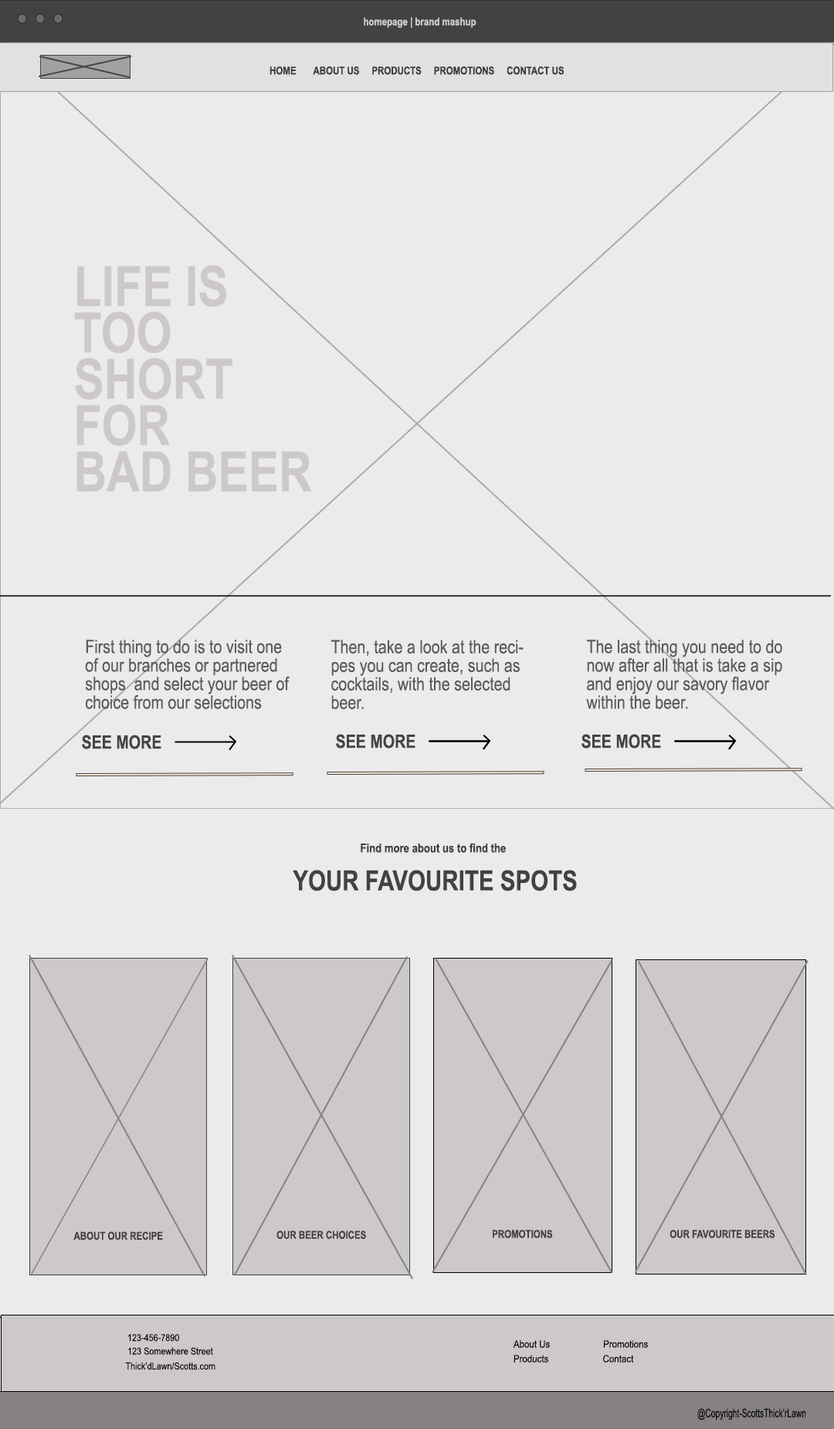
<style>
.page{position:relative;width:834px;height:1429px;background:#ebebeb}
.page>*{position:absolute;margin:0}
.t1{font:10.8px "ArialNarrow-Bold";color:#cec9c9}
.t2{font:10.8px "ArialNarrow-Bold";color:#3f3c3c}
.t3{font:55.6px/46.4px "ArialNarrow-Bold";color:#cec9c9}
.t4{font:18.5px/18.5px "ArialNarrow";color:#5d5b5b}
.t5{font:18.5px "ArialNarrow-Bold";color:#464343}
.t6{font:12.4px "ArialNarrow-Bold";color:#454141}
.t7{font:27.8px "ArialNarrow-Bold";color:#454141}
.t8{font:10.8px "ArialNarrow-Bold";color:#454141}
.t9{font:9.7px "ArialNarrow";color:#080808;scale:1.05 1}
.t10{font:10.1px "ArialNarrow";color:#080808;scale:1.08 1}
.t11{font:11.9px "ArialNarrow";color:#080808;scale:0.81 1}
</style>
<div class="page">
<p class="t1" style="left:364px;top:17px;width:113px;height:11px">homepage | brand mashup</p>
<p class="t2" style="left:270px;top:66px;width:295px;height:9px">HOME       ABOUT US     PRODUCTS     PROMOTIONS     CONTACT US</p>
<p class="t3" style="left:74px;top:265px;width:238px;height:227px">LIFE IS TOO SHORT FOR <br>BAD BEER</p>
<p class="t4" style="left:85px;top:640px;width:205px;height:69px">First thing to do is to visit one of our branches or partnered shops  and select your beer of choice from our selections</p>
<p class="t4" style="left:331px;top:640px;width:193px;height:70px">Then, take a look at the recipes you can create, such as cocktails, with the selected beer.</p>
<p class="t4" style="left:586px;top:640px;width:197px;height:69px">The last thing you need to do now after all that is take a sip and enjoy our savory flavor within the beer.</p>
<p class="t5" style="left:82px;top:735px;width:79px;height:14px">SEE MORE</p>
<p class="t5" style="left:336px;top:734px;width:80px;height:15px">SEE MORE</p>
<p class="t5" style="left:582px;top:734px;width:79px;height:15px">SEE MORE</p>
<p class="t6" style="left:361px;top:843px;width:145px;height:10px">Find more about us to find the</p>
<p class="t7" style="left:293px;top:870px;width:284px;height:22px">YOUR FAVOURITE SPOTS</p>
<p class="t8" style="left:493px;top:1230px;width:60px;height:8px">PROMOTIONS</p>
<p class="t8" style="left:670px;top:1230px;width:106px;height:8px">OUR FAVOURITE BEERS</p>
<p class="t8" style="left:73px;top:1231px;width:90px;height:9px">ABOUT OUR RECIPE</p>
<p class="t8" style="left:277px;top:1231px;width:89px;height:8px">OUR BEER CHOICES</p>
<p class="t9" style="left:128px;top:1334px;width:51px;height:8px">123-456-7890</p>
<p class="t9" style="left:128px;top:1347px;width:85px;height:8px">123 Somewhere Street</p>
<p class="t10" style="left:513px;top:1340px;width:37px;height:8px">About Us</p>
<p class="t10" style="left:603px;top:1340px;width:45px;height:8px">Promotions</p>
<p class="t9" style="left:125px;top:1362px;width:91px;height:8px">Thick’dLawn/Scotts.com</p>
<p class="t10" style="left:514px;top:1355px;width:35px;height:8px">Products</p>
<p class="t10" style="left:603px;top:1355px;width:31px;height:8px">Contact</p>
<p class="t11" style="left:698px;top:1408px;width:109px;height:13px">@Copyright-ScottsThick’rLawn</p>
</div>
